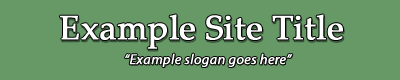
<style>
.page{position:relative;width:400px;height:80px;background:#669966}
.page>*{position:absolute;margin:0}
.t1{font:33.8px "PalatinoLinotype-Roman";color:#ffffff;font-weight:bold}
.t2{font:14.3px "Myriad-Italic";color:#ffffff;font-weight:bold}
</style>
<div class="page">
<p class="t1" style="left:60px;top:14px;width:283px;height:35px">Example Site Title</p>
<p class="t2" style="left:125px;top:53px;width:168px;height:14px">“Example slogan goes here”</p>
</div>
